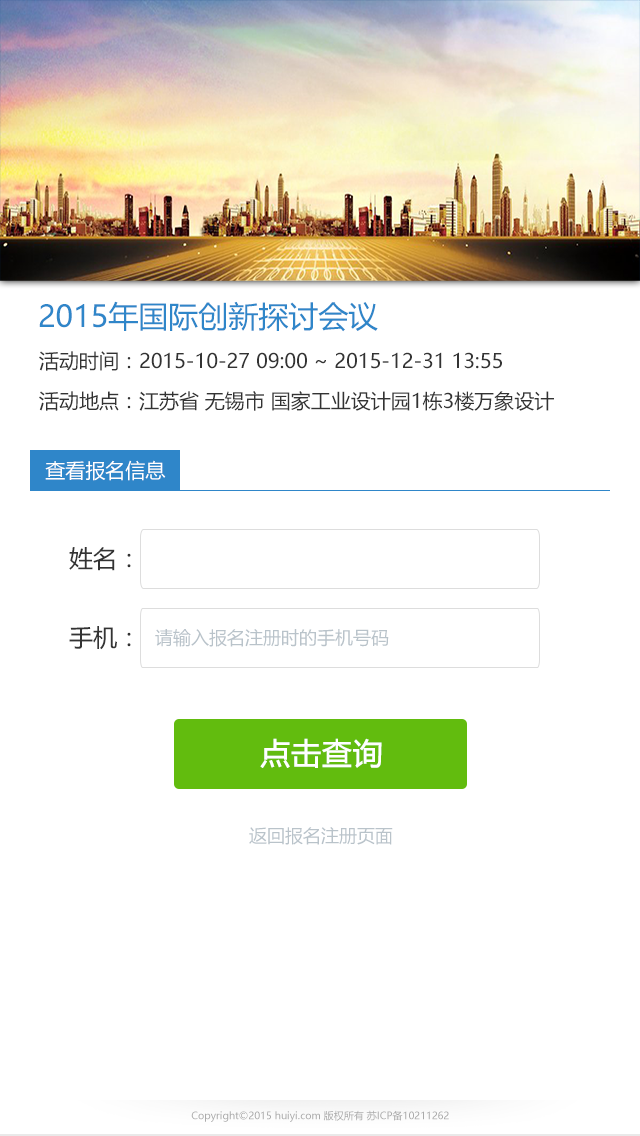
<style>
.page{position:relative;width:640px;height:1136px;background:#ffffff}
.page>*{position:absolute;margin:0}
.t1{font:30px "MicrosoftYaHei";color:#2f86c9;text-transform:uppercase}
.t2{font:20px "MicrosoftYaHei";color:#333333}
.t3{font:20px "MicrosoftYaHei";color:#ffffff;text-transform:uppercase}
.t4{font:24px "MicrosoftYaHei";color:#333333}
.t5{font:18px "MicrosoftYaHei";color:#b9c3ca}
.t6{font:30px "MicrosoftYaHei";color:#ffffff;font-weight:bold}
.t7{font:10px "MicrosoftYaHei";color:#aaaaaa}
</style>
<div class="page">
<p class="t1" style="left:39px;top:301px;width:339px;height:31px">2015年国际创新探讨会议</p>
<p class="t2" style="left:39px;top:351px;width:463px;height:20px">活动时间：2015-10-27 09:00 ~ 2015-12-31 13:55</p>
<p class="t2" style="left:39px;top:391px;width:515px;height:20px">活动地点：江苏省 无锡市 国家工业设计园1栋3楼万象设计</p>
<p class="t3" style="left:45px;top:460px;width:121px;height:21px">查看报名信息</p>
<p class="t4" style="left:69px;top:547px;width:62px;height:24px">姓名：</p>
<p class="t4" style="left:69px;top:626px;width:62px;height:24px">手机：</p>
<p class="t5" style="left:155px;top:629px;width:234px;height:18px">请输入报名注册时的手机号码</p>
<p class="t6" style="left:260px;top:738px;width:122px;height:30px">点击查询</p>
<p class="t5" style="left:249px;top:827px;width:144px;height:18px">返回报名注册页面</p>
<p class="t7" style="left:191px;top:1110px;width:258px;height:12px">Copyright©2015 huiyi.com 版权所有 苏ICP备10211262</p>
</div>
